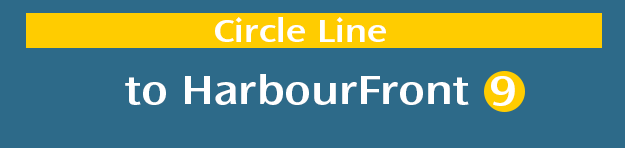
<style>
.page{position:relative;width:625px;height:148px;background:#2d6a89}
.page>*{position:absolute;margin:0}
.t1{font:33.3px "OceanSansStd-SemiboldExt";color:#ffffff}
.t2{font:41.7px "OceanSansStd-SemiboldExt";color:#ffffff}
</style>
<div class="page">
<p class="t1" style="left:215px;top:17px;width:171px;height:25px">Circle Line</p>
<p class="t2" style="left:125px;top:74px;width:344px;height:31px">to HarbourFront</p>
<p class="t2" style="left:491px;top:76px;width:24px;height:30px">9</p>
</div>
